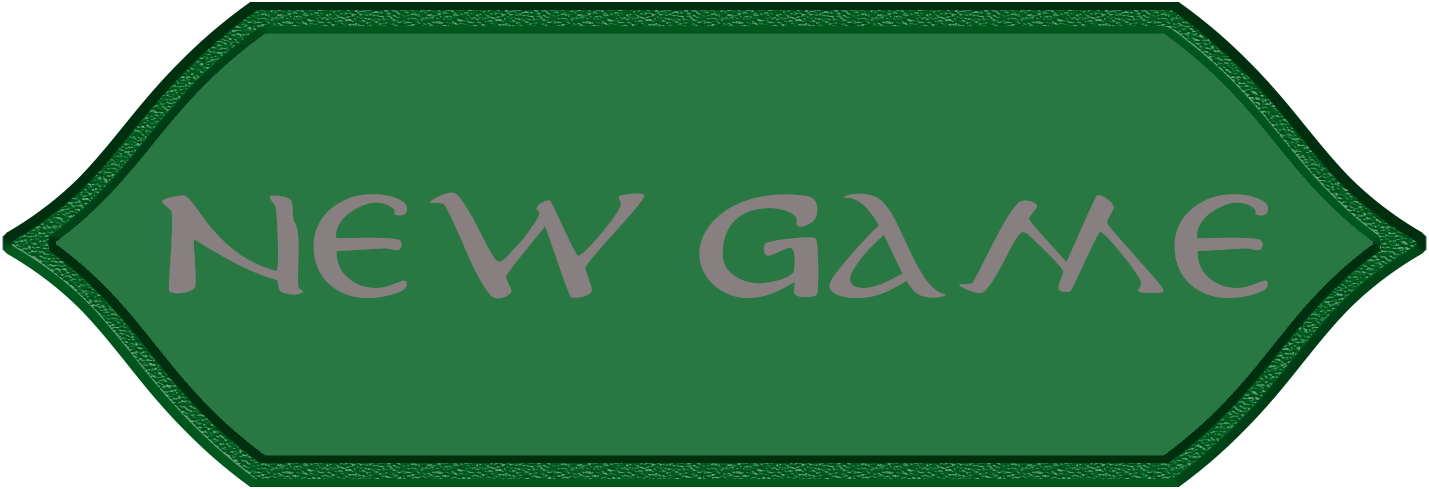
<style>
.page{position:relative;width:1429px;height:489px;background:#297844}
.page>*{position:absolute;margin:0}
.t1{font:144.4px "MiddleEarth";color:#888080}
</style>
<div class="page">
<p class="t1" style="left:162px;top:192px;width:1106px;height:107px">NEW GAME</p>
</div>
